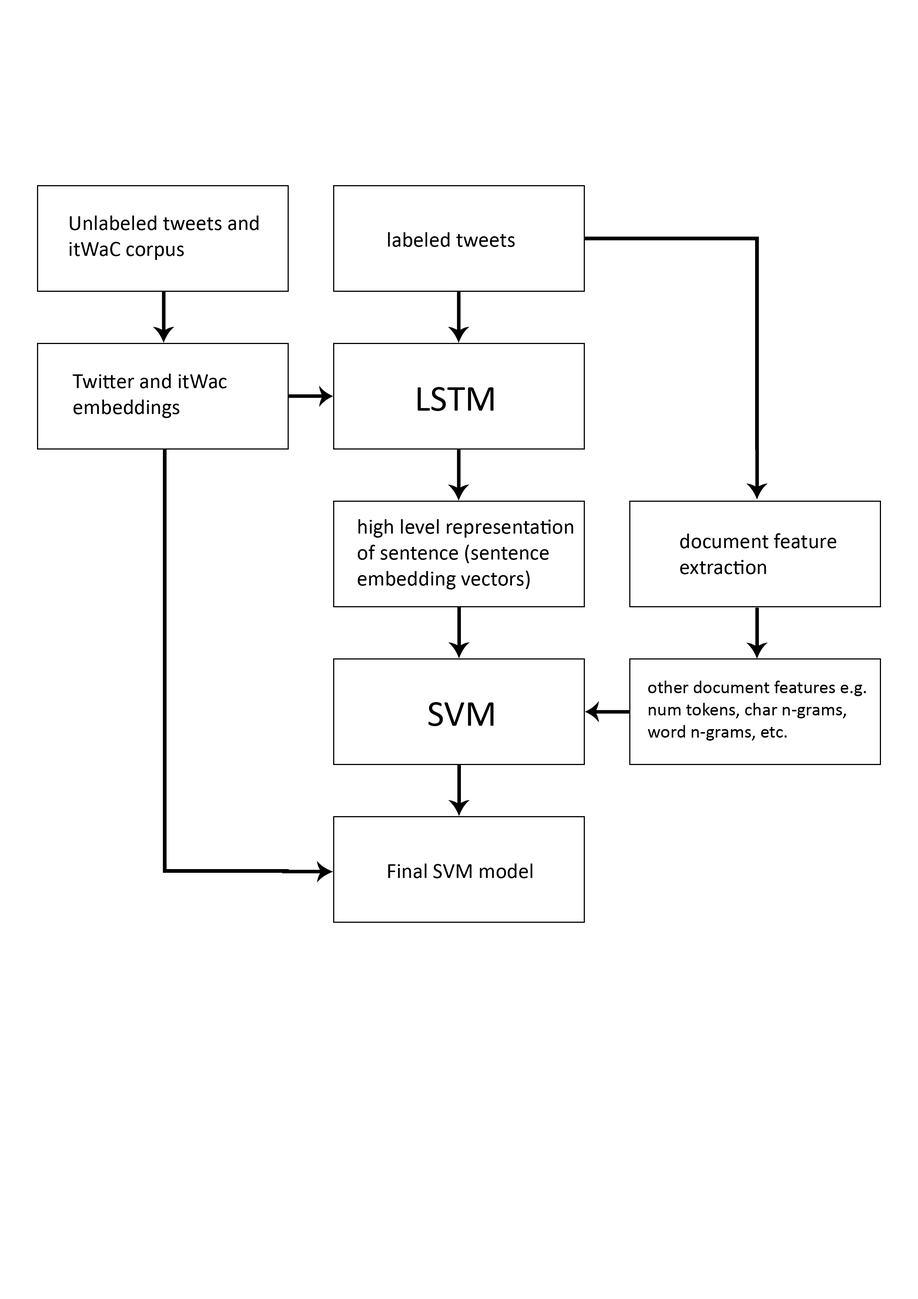
<style>
.page{position:relative;width:918px;height:1299px;background:#ffffff}
.page>*{position:absolute;margin:0}
.t1{font:21.6px "Calibri";color:#000000}
.t2{font:37px "Calibri";color:#000000}
.t3{font:18.5px "Calibri";color:#000000}
</style>
<div class="page">
<p class="t1" style="left:69px;top:215px;width:190px;height:45px">Unlabeled tweets and itWaC corpus</p>
<p class="t1" style="left:388px;top:232px;width:127px;height:15px">labeled tweets</p>
<p class="t1" style="left:73px;top:374px;width:154px;height:44px">Twitter and itWac embeddings</p>
<p class="t2" style="left:418px;top:387px;width:76px;height:24px">LSTM</p>
<p class="t1" style="left:358px;top:519px;width:215px;height:70px">high level representation of sentence (sentence embedding vectors)</p>
<p class="t1" style="left:680px;top:533px;width:157px;height:41px">document feature extraction</p>
<p class="t3" style="left:648px;top:680px;width:218px;height:60px">other document features e.g. num tokens, char n-grams, word n-grams, etc.</p>
<p class="t2" style="left:428px;top:702px;width:66px;height:24px">SVM</p>
<p class="t1" style="left:388px;top:863px;width:144px;height:15px">Final SVM model</p>
</div>
